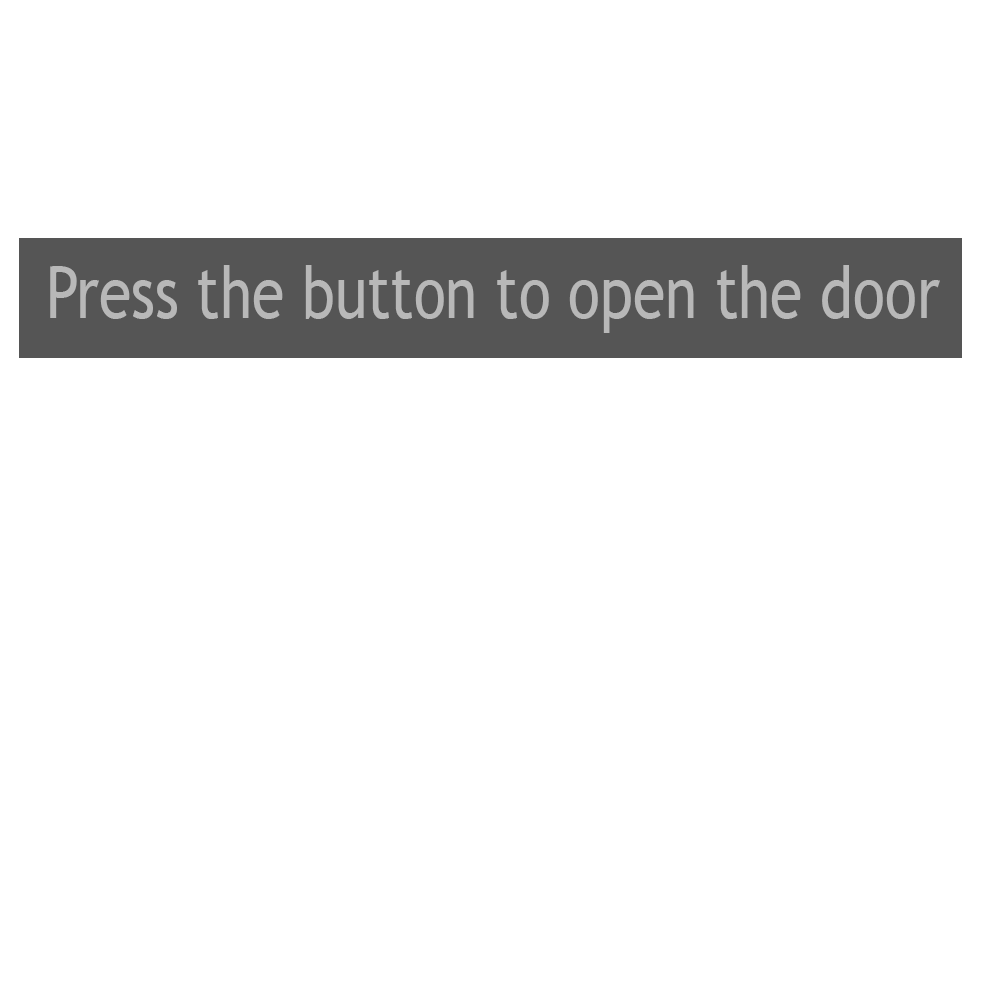
<style>
.page{position:relative;width:1000px;height:1000px;background:#ffffff}
.page>*{position:absolute;margin:0}
.t1{font:72.1px "TrebuchetMS";color:#b8b8b8;scale:0.82 1}
</style>
<div class="page">
<p class="t1" style="left:50px;top:265px;width:890px;height:68px">Press the button to open the door</p>
</div>
